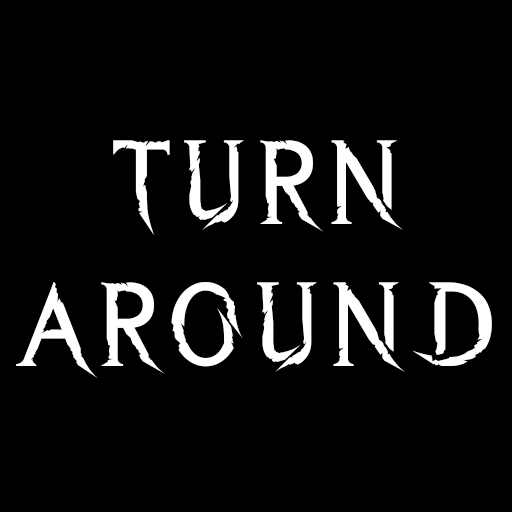
<style>
.page{position:relative;width:512px;height:512px;background:#000000}
.page>*{position:absolute;margin:0}
.t1{font:118.2px "WreckedShipRegular";letter-spacing:0.05em;color:#ffffff}
</style>
<div class="page">
<p class="t1" style="left:16px;top:140px;width:476px;height:238px;text-align:center">TURN AROUND</p>
</div>
